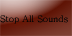
<style>
.page{position:relative;width:72px;height:36px}
.page>*{position:absolute;margin:0}
.t1{font:9px "Batang";color:#050505}
</style>
<div class="page">
<p class="t1" style="left:0px;top:15px;width:68px;height:9px">Stop All Sounds</p>
</div>
